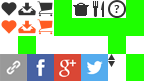
<style>
.page{position:relative;width:144px;height:81px;background:#ffffff}
.page>*{position:absolute;margin:0}
.t1{font:12px "Lato-Bold";letter-spacing:0.28em;color:#333333;text-transform:uppercase}
</style>
<div class="page">
<p class="t1" style="left:114px;top:5px;width:6px;height:8px">?</p>
</div>
